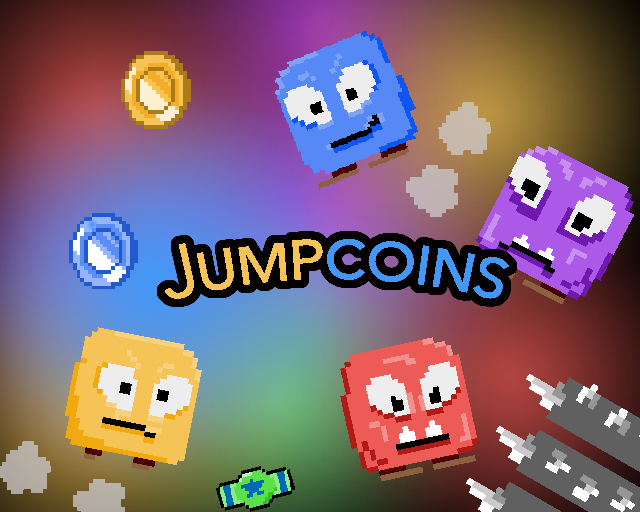
<style>
.page{position:relative;width:640px;height:512px}
.page>*{position:absolute;margin:0}
.t1{font:72px "AvenirNext-Regular";color:#4397f7;font-variant:small-caps}
.t2{font:72px "AvenirNext-Regular";color:#f6c456;font-variant:small-caps}
</style>
<div class="page">
<p class="t1" style="left:165px;top:239px;width:344px;height:60px"><span class="t2">Jump</span>coins</p>
</div>
